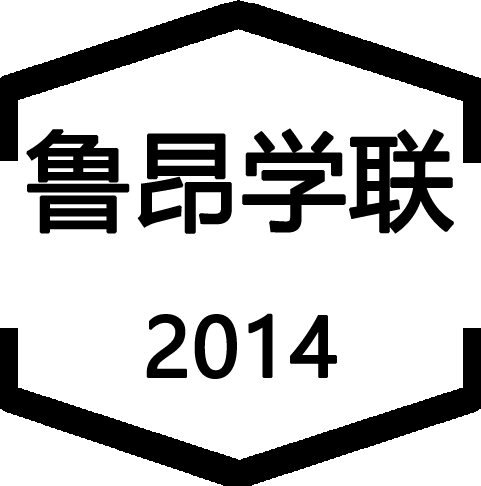
<style>
.page{position:relative;width:481px;height:486px;background:#ffffff}
.page>*{position:absolute;margin:0}
.t1{font:105px/180px "MicrosoftYaHei";color:#000000;font-weight:bold}
.t2{font:80px/180px "MicrosoftYaHei";color:#000000;font-weight:bold}
</style>
<div class="page">
<p class="t1" style="left:26px;top:128px;width:428px;height:251px;text-align:center">鲁昂学联<br><span class="t2">2014</span></p>
</div>
